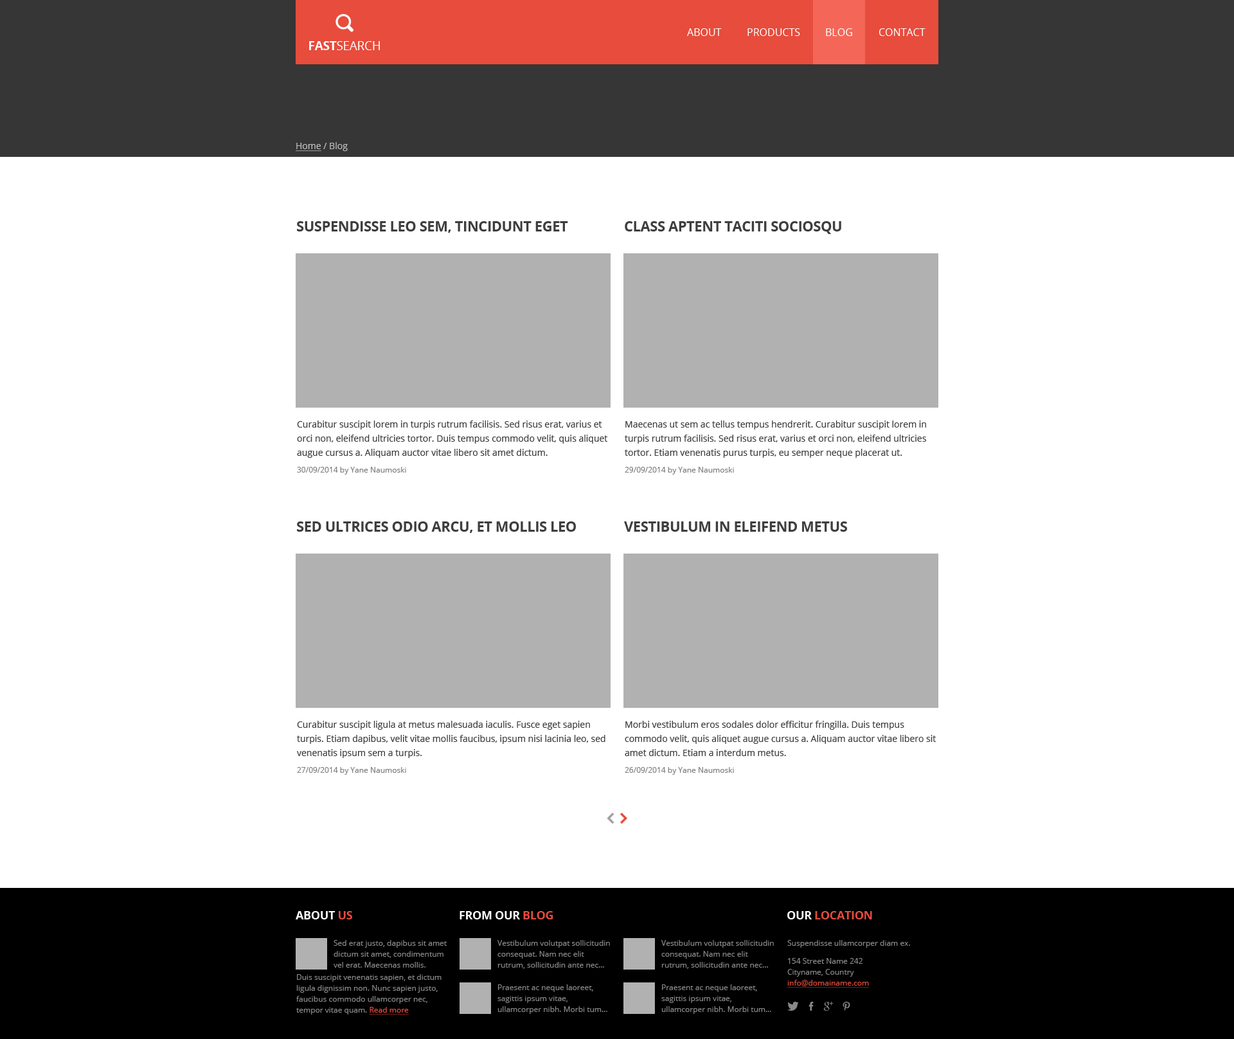
<style>
.page{position:relative;width:1234px;height:1039px;background:#ffffff}
.page>*{position:absolute;margin:0}
.t1{font:10.3px "OpenSans";color:#ffffff;text-transform:uppercase}
.t2{font:9px "OpenSans";color:#bfbfbf}
.t3{font:9px "OpenSans";color:#bfbfbf;text-decoration:underline}
.t4{font:14.1px "OpenSans-Bold";letter-spacing:-0.02em;color:#3e3e3e;text-transform:uppercase}
.t5{font:9px/14.1px "OpenSans";color:#3e3e3e}
.t6{font:7.7px/16.7px "OpenSans";color:#808080}
.t7{font:11.6px "OpenSans-Bold";letter-spacing:-0.02em;color:#ffffff;text-transform:uppercase}
.t8{font:11.6px "OpenSans-Bold";letter-spacing:-0.02em;color:#e74c3c;text-transform:uppercase}
.t9{font:7.7px/10.9px "OpenSans";color:#8a8a8a}
.t10{font:7.7px/18px "OpenSans";color:#8a8a8a}
.t11{font:7.7px/10.9px "OpenSans";color:#e74c3c;text-decoration:underline}
.t12{font:7.7px/10.9px "OpenSans";color:#8a8989}
</style>
<div class="page">
<p class="t1" style="left:687px;top:28px;width:35px;height:8px">About</p>
<p class="t1" style="left:748px;top:28px;width:52px;height:8px">products</p>
<p class="t1" style="left:826px;top:28px;width:26px;height:8px">blog</p>
<p class="t1" style="left:879px;top:28px;width:47px;height:8px">Contact</p>
<p class="t2" style="left:296px;top:142px;width:52px;height:9px"><span class="t3">Home</span> / Blog</p>
<p class="t4" style="left:297px;top:221px;width:271px;height:12px">Suspendisse leo sem, tincidunt eget</p>
<p class="t4" style="left:625px;top:221px;width:216px;height:13px">Class aptent taciti sociosqu</p>
<p class="t5" style="left:297px;top:420px;width:310px;height:54px">Curabitur suscipit lorem in turpis rutrum facilisis. Sed risus erat, varius et orci non, eleifend ultricies tortor. Duis tempus commodo velit, quis aliquet augue cursus a. Aliquam auctor vitae libero sit amet dictum.<br><span class="t6">30/09/2014 by Yane Naumoski</span></p>
<p class="t5" style="left:625px;top:420px;width:301px;height:54px">Maecenas ut sem ac tellus tempus hendrerit. Curabitur suscipit lorem in turpis rutrum facilisis. Sed risus erat, varius et orci non, eleifend ultricies tortor. Etiam venenatis purus turpis, eu semper neque placerat ut.<br><span class="t6">29/09/2014 by Yane Naumoski</span></p>
<p class="t4" style="left:297px;top:521px;width:279px;height:12px">Sed ultrices odio arcu, et mollis leo</p>
<p class="t4" style="left:624px;top:521px;width:223px;height:11px">Vestibulum in eleifend metus</p>
<p class="t5" style="left:297px;top:721px;width:309px;height:54px">Curabitur suscipit ligula at metus malesuada iaculis. Fusce eget sapien turpis. Etiam dapibus, velit vitae mollis faucibus, ipsum nisi lacinia leo, sed venenatis ipsum sem a turpis.<br><span class="t6">27/09/2014 by Yane Naumoski</span></p>
<p class="t5" style="left:625px;top:721px;width:311px;height:54px">Morbi vestibulum eros sodales dolor efficitur fringilla. Duis tempus commodo velit, quis aliquet augue cursus a. Aliquam auctor vitae libero sit amet dictum. Etiam a interdum metus.<br><span class="t6">26/09/2014 by Yane Naumoski</span></p>
<p class="t7" style="left:296px;top:911px;width:56px;height:8px">About <span class="t8">us</span></p>
<p class="t7" style="left:460px;top:911px;width:93px;height:8px">From our <span class="t8">blog</span></p>
<p class="t8" style="left:787px;top:911px;width:85px;height:8px"><span class="t7">our </span>Location</p>
<p class="t9" style="left:334px;top:940px;width:113px;height:27px">Sed erat justo, dapibus sit amet dictum sit amet, condimentum vel erat. Maecenas mollis. tincidunt sollicitudin</p>
<p class="t9" style="left:498px;top:940px;width:112px;height:29px">Vestibulum volutpat sollicitudin consequat. Nam nec elit rutrum, sollicitudin ante nec...</p>
<p class="t9" style="left:661px;top:940px;width:113px;height:29px">Vestibulum volutpat sollicitudin consequat. Nam nec elit rutrum, sollicitudin ante nec...</p>
<p class="t9" style="left:787px;top:940px;width:123px;height:47px">Suspendisse ullamcorper diam ex.<br><span class="t10">154 Street Name 242<br></span>Cityname, Country<br><span class="t11">info@domainame.com</span></p>
<p class="t9" style="left:296px;top:974px;width:146px;height:40px">Duis suscipit venenatis sapien, et dictum ligula dignissim non. Nunc sapien justo, faucibus commodo ullamcorper nec, tempor vitae quam. <span class="t11">Read more</span></p>
<p class="t12" style="left:498px;top:984px;width:109px;height:30px">Praesent ac neque laoreet, sagittis ipsum vitae, ullamcorper nibh. Morbi tum... orci li</p>
<p class="t12" style="left:661px;top:984px;width:110px;height:30px">Praesent ac neque laoreet, sagittis ipsum vitae, ullamcorper nibh. Morbi tum... orci li</p>
</div>
